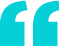
<style>
.page{position:relative;width:59px;height:46px;background:#05d0d7}
.page>*{position:absolute;margin:0}
.t1{font:125px "GothamBlack";letter-spacing:-0.05em;color:#05d0d7}
</style>
<div class="page">
<p class="t1" style="left:0px;top:0px;width:61px;height:47px">“</p>
</div>
